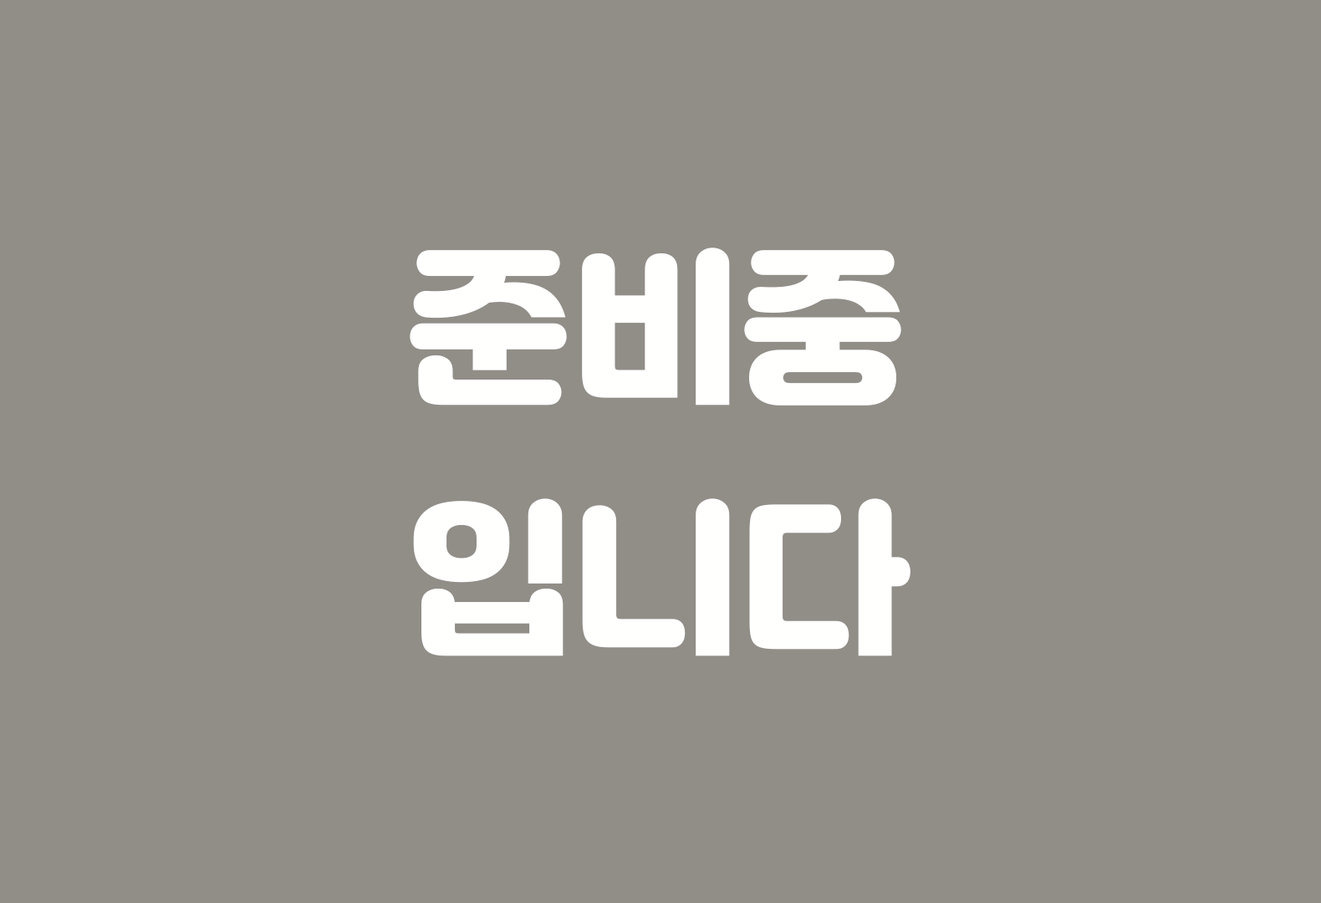
<style>
.page{position:relative;width:1321px;height:903px;background:#918d87}
.page>*{position:absolute;margin:0}
.t1{font:167.2px/250.8px "Jalnan";color:#fffffe}
</style>
<div class="page">
<p class="t1" style="left:410px;top:247px;width:500px;height:409px">준비중<br>입니다</p>
</div>
